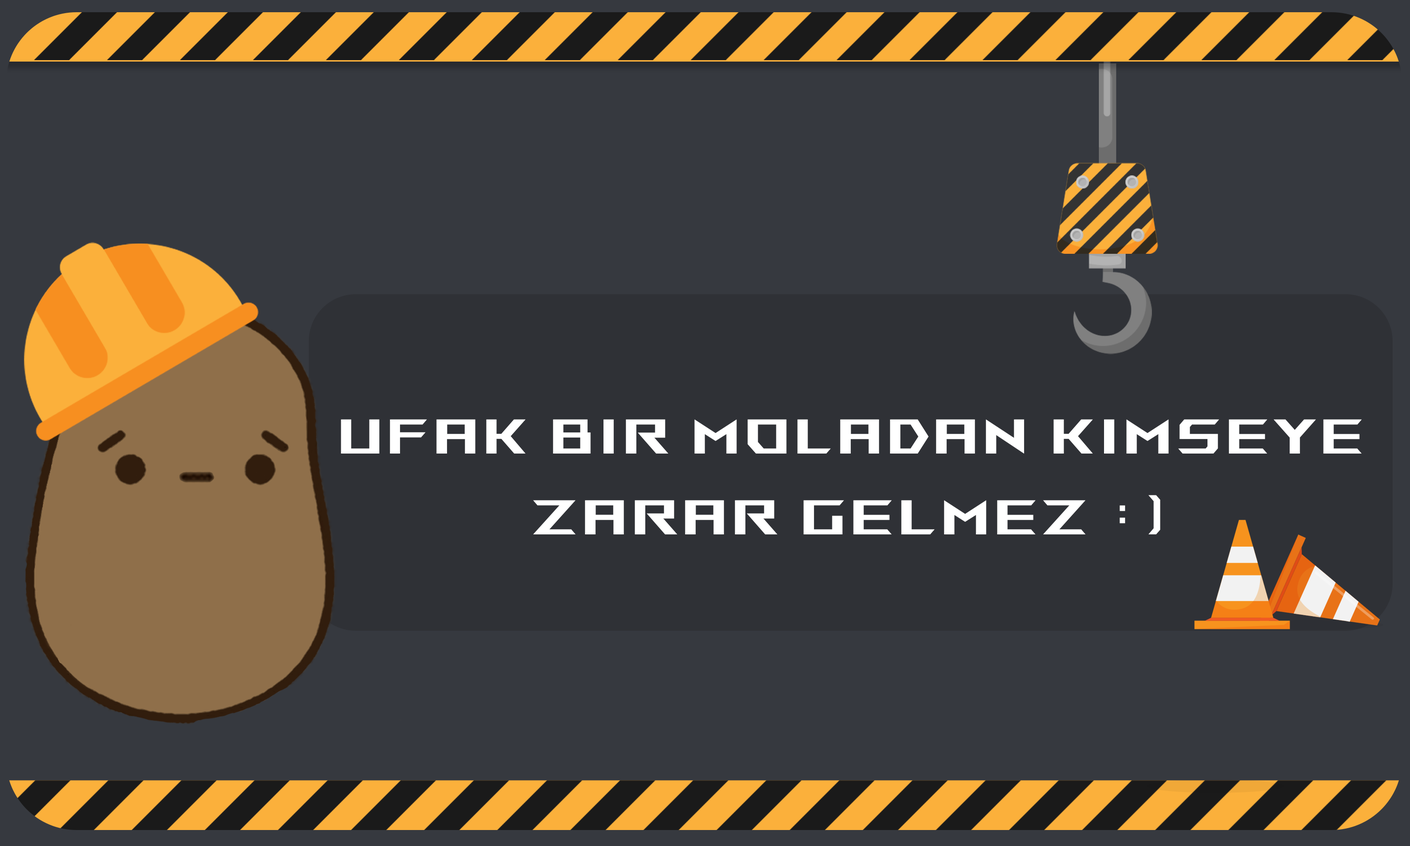
<style>
.page{position:relative;width:1410px;height:846px;background:#36393f}
.page>*{position:absolute;margin:0}
.t1{font:78.3px "ROGFontsv1.6-Regular";letter-spacing:0.06em;color:#ffffff}
</style>
<div class="page">
<p class="t1" style="left:341px;top:419px;width:1021px;height:115px">Ufak bir moladan kimseye zarar gelmez :)</p>
</div>
